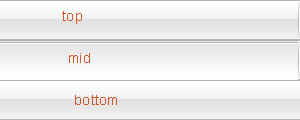
<style>
.page{position:relative;width:300px;height:120px}
.page>*{position:absolute;margin:0}
.t1{font:14px "ArialMT";letter-spacing:0.02em;color:#cf5a2e}
</style>
<div class="page">
<p class="t1" style="left:62px;top:11px;width:20px;height:13px">top</p>
<p class="t1" style="left:69px;top:53px;width:21px;height:10px">mid</p>
<p class="t1" style="left:75px;top:95px;width:42px;height:10px">bottom</p>
</div>
